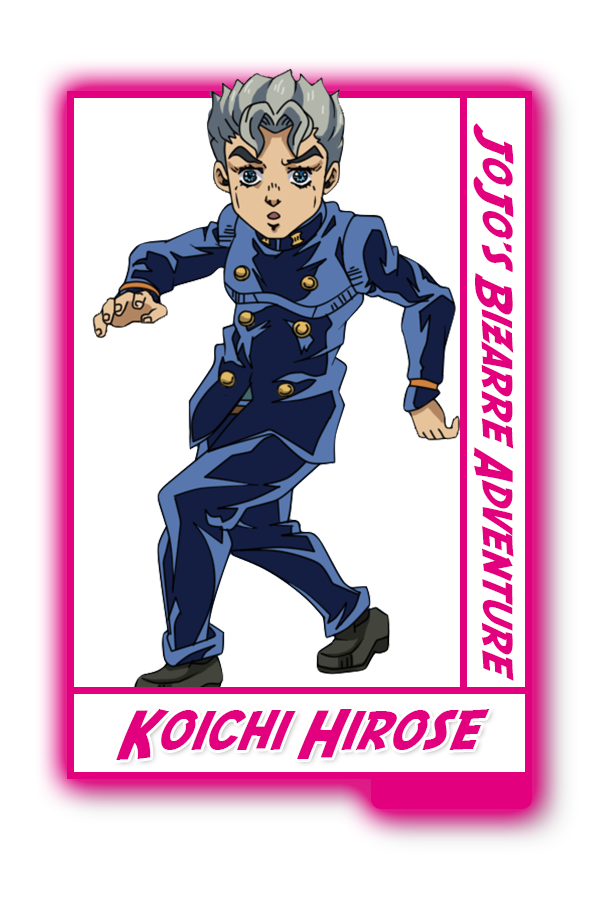
<style>
.page{position:relative;width:600px;height:900px;background:#ffffff}
.page>*{position:absolute;margin:0}
.t1{font:42.4px "SFFedora";color:#e3007e}
.t2{font:55.4px "SFFedora";color:#e3007e}
</style>
<div class="page">
<p class="t1" style="left:473px;top:123px;width:41px;height:558px;rotate:90deg">JoJo's Bizarre Adventure</p>
<p class="t2" style="left:116px;top:709px;width:374px;height:51px">Koichi Hirose</p>
</div>
